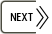
<style>
.page{position:relative;width:52px;height:34px;background:#ffffff}
.page>*{position:absolute;margin:0}
.t1{font:12px "LigurinoCondensed";letter-spacing:0.05em;color:#000000}
</style>
<div class="page">
<p class="t1" style="left:10px;top:13px;width:23px;height:8px">NEXT</p>
</div>
